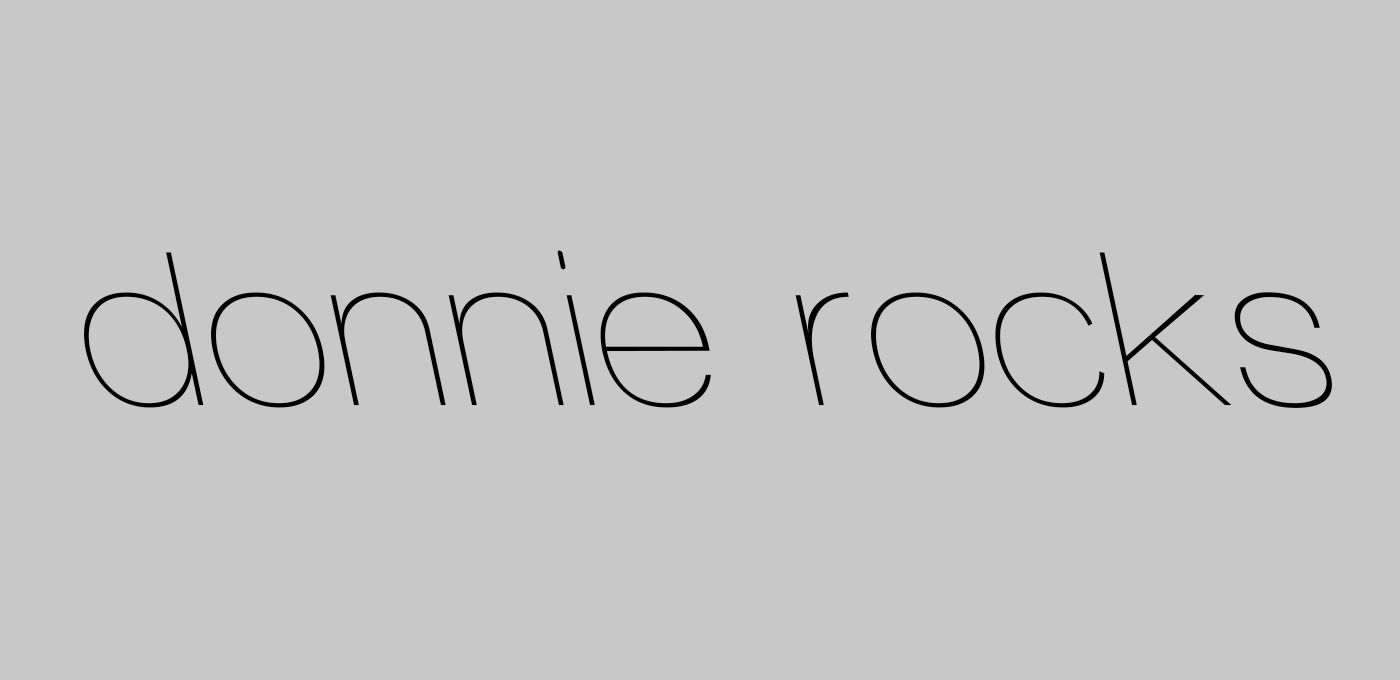
<style>
.page{position:relative;width:1400px;height:680px;background:#c9c8c8}
.page>*{position:absolute;margin:0}
.t1{font:225px "WalkwayRevOblique";color:#000000}
</style>
<div class="page">
<p class="t1" style="left:84px;top:250px;width:1248px;height:158px">donnie rocks</p>
</div>
